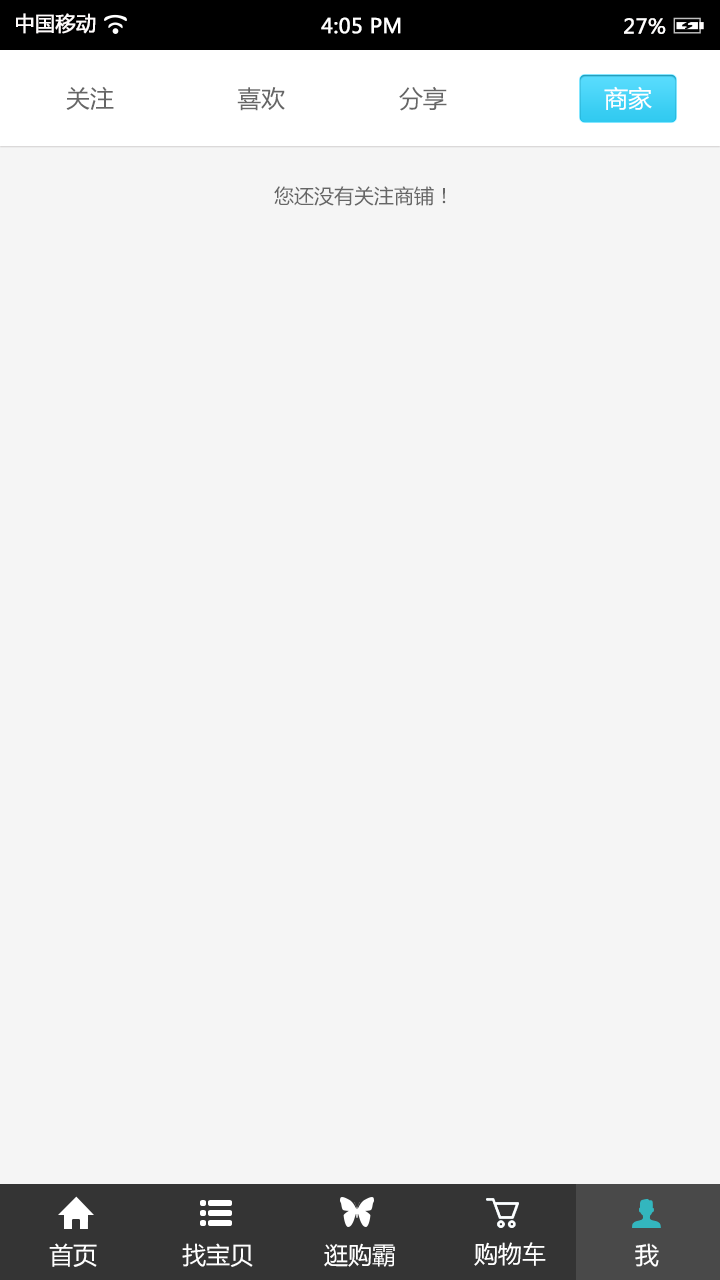
<style>
.page{position:relative;width:720px;height:1280px;background:#f5f5f5}
.page>*{position:absolute;margin:0}
.t1{font:20px "MicrosoftYaHei";color:#fffcfc;font-weight:bold}
.t2{font:20px "MicrosoftYaHei";color:#ffffff;font-weight:bold}
.t3{font:20px "MicrosoftYaHei";color:#fffefe;font-weight:bold}
.t4{font:24px "MicrosoftYaHei";color:#666666}
.t5{font:24px "MicrosoftYaHei";color:#ffffff}
.t6{font:20px "MicrosoftYaHei";color:#666666}
</style>
<div class="page">
<p class="t1" style="left:16px;top:13px;width:80px;height:21px">中国移动</p>
<p class="t2" style="left:321px;top:17px;width:80px;height:17px">4:05 PM</p>
<p class="t3" style="left:624px;top:18px;width:42px;height:16px">27%</p>
<p class="t4" style="left:66px;top:86px;width:48px;height:24px">关注</p>
<p class="t4" style="left:237px;top:87px;width:48px;height:24px">喜欢</p>
<p class="t4" style="left:399px;top:86px;width:48px;height:25px">分享</p>
<p class="t5" style="left:604px;top:86px;width:48px;height:24px">商家</p>
<p class="t6" style="left:274px;top:186px;width:172px;height:20px">您还没有关注商铺！</p>
<p class="t5" style="left:49px;top:1243px;width:48px;height:24px">首页</p>
<p class="t5" style="left:182px;top:1243px;width:71px;height:24px">找宝贝</p>
<p class="t5" style="left:324px;top:1243px;width:71px;height:24px">逛购霸</p>
<p class="t5" style="left:474px;top:1242px;width:72px;height:24px">购物车</p>
<p class="t5" style="left:635px;top:1243px;width:24px;height:24px">我</p>
</div>
